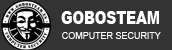
<style>
.page{position:relative;width:172px;height:50px;background:#333333}
.page>*{position:absolute;margin:0}
.t1{font:17.7px "Arial-Black";color:#ffffff;scale:0.78 1}
.t2{font:9px "ArialMT";color:#ffffff}
</style>
<div class="page">
<p class="t1" style="left:61px;top:11px;width:98px;height:13px">GOBOSTEAM</p>
<p class="t2" style="left:62px;top:32px;width:99px;height:7px">COMPUTER SECURITY</p>
</div>
